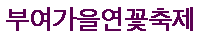
<style>
.page{position:relative;width:200px;height:40px;background:#ffffff}
.page>*{position:absolute;margin:0}
.t1{font:24px "Dotum";letter-spacing:-0.05em;color:#5b0152;font-weight:bold}
</style>
<div class="page">
<p class="t1" style="left:6px;top:7px;width:187px;height:24px">부여가을연꽃축제</p>
</div>
